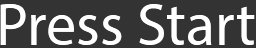
<style>
.page{position:relative;width:256px;height:48px;background:#333333}
.page>*{position:absolute;margin:0}
.t1{font:60px "MyriadPro-Regular";color:#ffffff}
</style>
<div class="page">
<p class="t1" style="left:0px;top:4px;width:255px;height:41px">Press Start</p>
</div>
